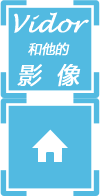
<style>
.page{position:relative;width:100px;height:196px;background:#52bae1}
.page>*{position:absolute;margin:0}
.t1{font:23px "LucidaHandwriting-Italic";color:#ffffff;font-weight:bold;font-style:italic}
.t2{font:13.2px "MicrosoftYaHei";color:#ffffff;font-weight:bold;font-style:italic}
.t3{font:23px "MicrosoftYaHei";color:#ffffff;font-weight:bold;font-style:italic}
</style>
<div class="page">
<p class="t1" style="left:14px;top:12px;width:75px;height:21px">Vidor</p>
<p class="t2" style="left:28px;top:42px;width:42px;height:14px">和他的</p>
<p class="t3" style="left:17px;top:64px;width:64px;height:23px">影  像</p>
</div>
